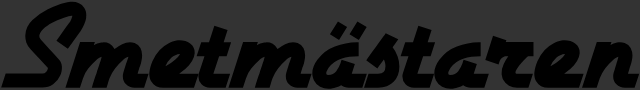
<style>
.page{position:relative;width:640px;height:90px;background:#333333}
.page>*{position:absolute;margin:0}
.t1{font:141px "Airstream";color:#000000}
</style>
<div class="page">
<p class="t1" style="left:1px;top:1px;width:639px;height:88px">Smetmästaren</p>
</div>
